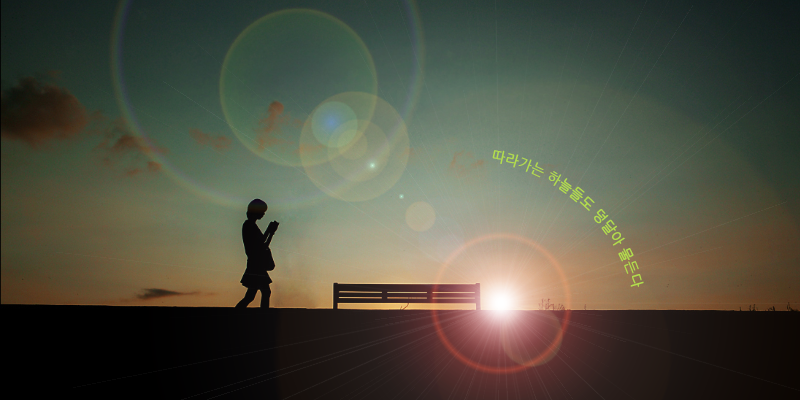
<style>
.page{position:relative;width:800px;height:400px}
.page>*{position:absolute;margin:0}
.t1{font:14px "NanumGothic";color:#b2dc4c;font-weight:bold}
</style>
<div class="page">
<p class="t1" style="left:492px;top:150px;width:152px;height:137px">따라가는 하늘들도 덩달아 물든다</p>
</div>
